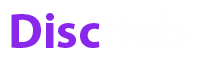
<style>
.page{position:relative;width:200px;height:60px;background:#ffffff}
.page>*{position:absolute;margin:0}
.t1{font:50px "MyriadPro-Bold";color:#8928ea}
</style>
<div class="page">
<p class="t1" style="left:11px;top:13px;width:89px;height:35px">Disc</p>
</div>
